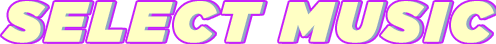
<style>
.page{position:relative;width:496px;height:44px;background:#ffffc4}
.page>*{position:absolute;margin:0}
.t1{font:56px "Gotham-UltraItalic";letter-spacing:0.075em;color:#ffffc4;font-weight:bold}
</style>
<div class="page">
<p class="t1" style="left:2px;top:1px;width:492px;height:42px">SELECT MUSIC</p>
</div>
